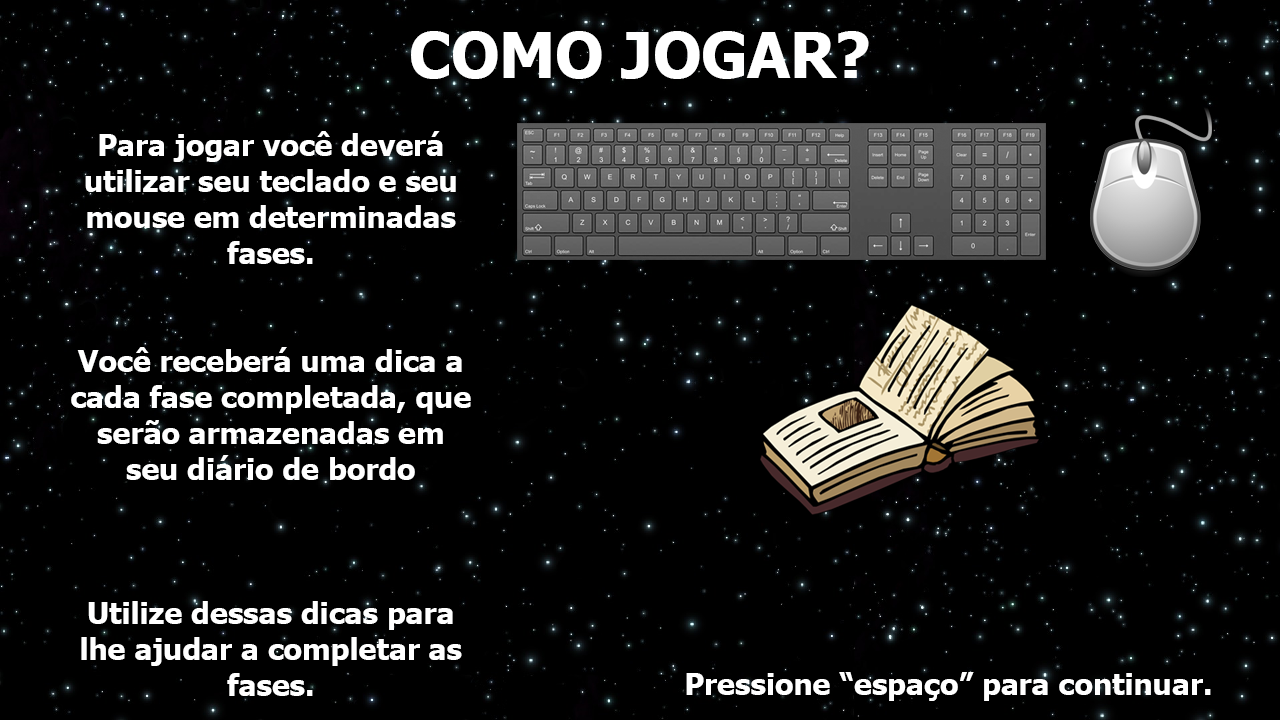
<style>
.page{position:relative;width:1280px;height:720px;background:#000000}
.page>*{position:absolute;margin:0}
.t1{font:62.5px "Tahoma-Bold";color:#ffffff}
.t2{font:30px "Tahoma-Bold";color:#ffffff}
</style>
<div class="page">
<p class="t1" style="left:411px;top:31px;width:458px;height:48px">COMO JOGAR?</p>
<p class="t2" style="left:71px;top:131px;width:400px;height:565px;text-align:center">Para jogar você deverá utilizar seu teclado e seu mouse em determinadas fases.<br><br><br>Você receberá uma dica a cada fase completada, que serão armazenadas em seu diário de bordo<br><br><br><br>Utilize dessas dicas para lhe ajudar a completar as fases.</p>
<p class="t2" style="left:686px;top:672px;width:525px;height:29px">Pressione “espaço” para continuar.</p>
</div>
